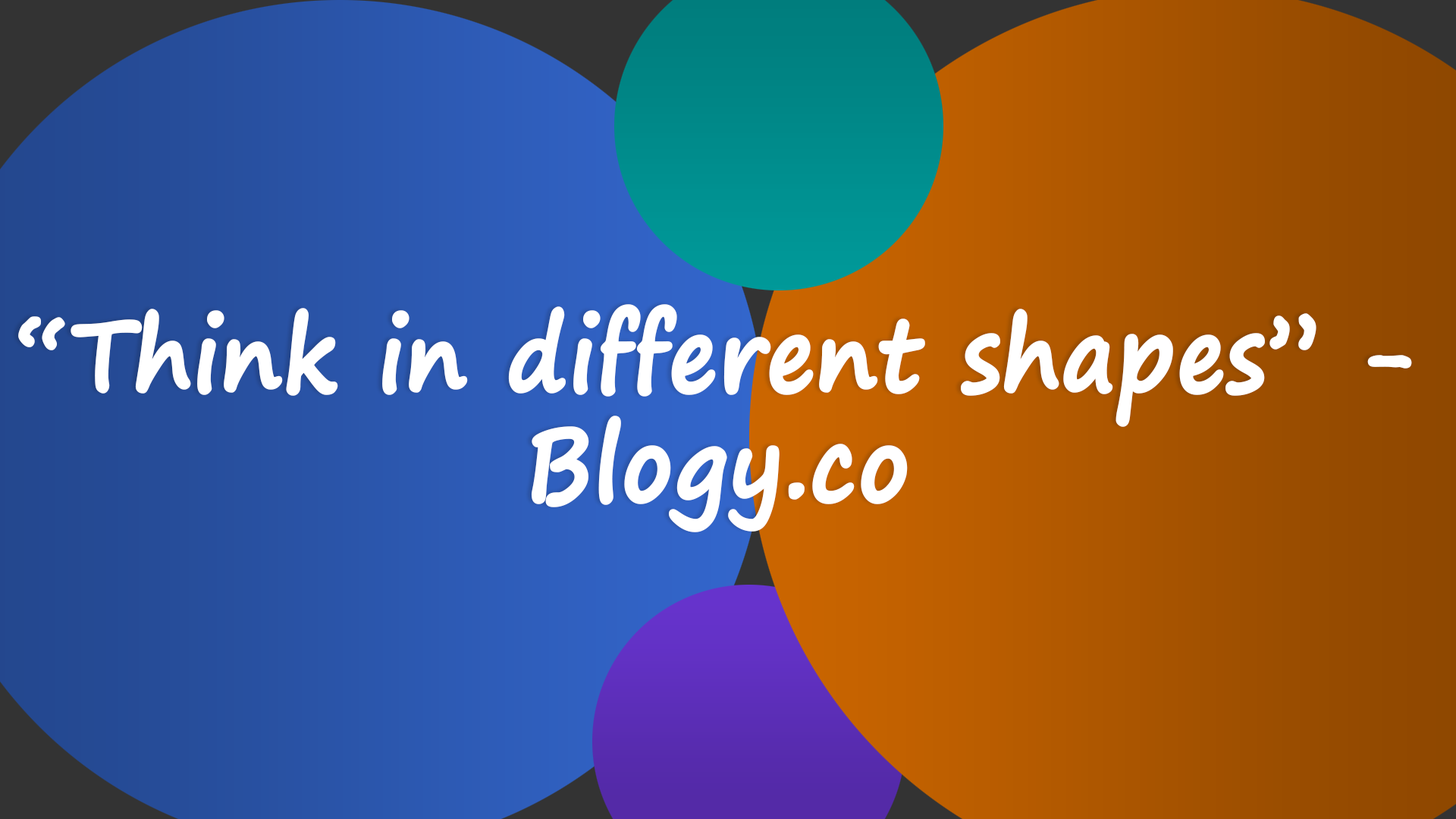
<style>
.page{position:relative;width:1456px;height:819px}
.page>*{position:absolute;margin:0}
.t1{font:100.1px "SegoePrint-Bold";color:#ffffff;font-weight:bold;scale:0.9 1}
</style>
<div class="page">
<p class="t1" style="left:18px;top:304px;width:1394px;height:228px;text-align:center">“Think in different shapes” - Blogy.co</p>
</div>
